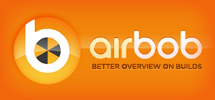
<style>
.page{position:relative;width:215px;height:100px}
.page>*{position:absolute;margin:0}
.t1{font:7.1px "GothamRounded-Medium";letter-spacing:-0.025em;color:#883e02;text-transform:uppercase}
</style>
<div class="page">
<p class="t1" style="left:92px;top:63px;width:110px;height:6px">better overview on builds</p>
</div>
